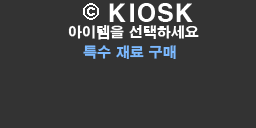
<style>
.page{position:relative;width:256px;height:128px;background:#333333}
.page>*{position:absolute;margin:0}
.t1{font:24px "H2gtrE";color:#ffffff}
.t2{font:14px "H2gtrE";color:#ffffff}
.t3{font:14px "H2gtrE";color:#7bb9ff}
</style>
<div class="page">
<p class="t1" style="left:109px;top:3px;width:84px;height:19px">KIOSK</p>
<p class="t2" style="left:68px;top:25px;width:131px;height:15px">아이템을 선택하세요</p>
<p class="t3" style="left:83px;top:45px;width:93px;height:14px">특수 재료 구매</p>
</div>
